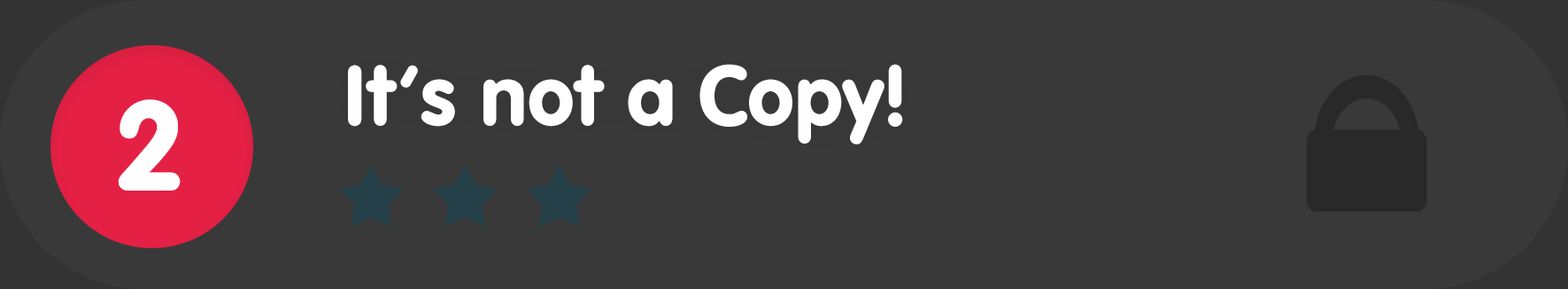
<style>
.page{position:relative;width:1568px;height:289px;background:#393939}
.page>*{position:absolute;margin:0}
.t1{font:88.5px "VAGRundschriftD";color:#ffffff}
.t2{font:132.8px "VAGRundschriftD";color:#ffffff}
</style>
<div class="page">
<p class="t1" style="left:348px;top:64px;width:555px;height:80px">It’s not a Copy!</p>
<p class="t2" style="left:118px;top:99px;width:63px;height:91px">2</p>
</div>
